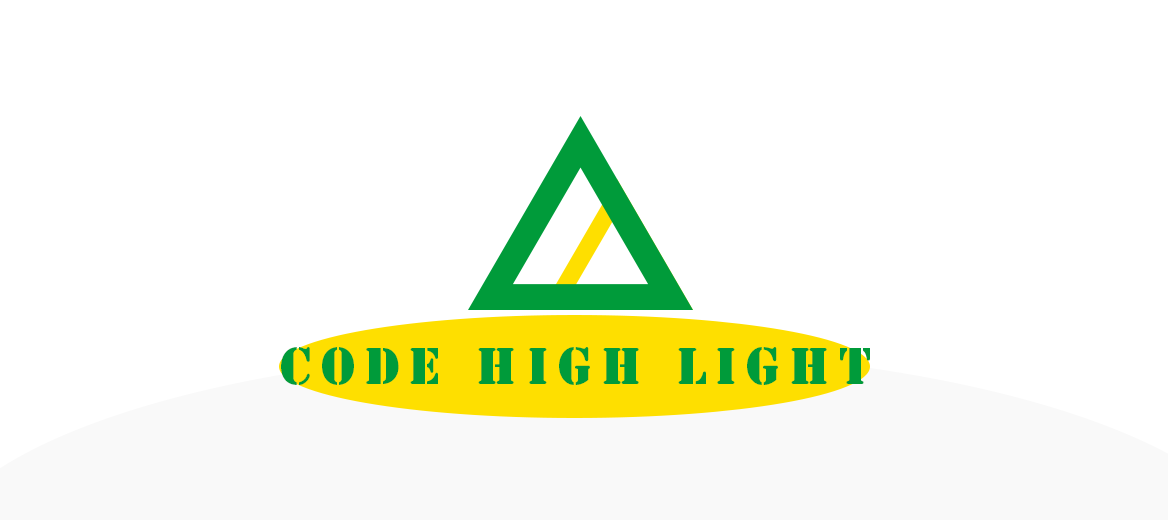
<style>
.page{position:relative;width:1168px;height:520px;background:#ffffff}
.page>*{position:absolute;margin:0}
.t1{font:48px "StencilStd";letter-spacing:0.2em;color:#009b3a}
</style>
<div class="page">
<p class="t1" style="left:281px;top:347px;width:589px;height:38px">code high light</p>
</div>
